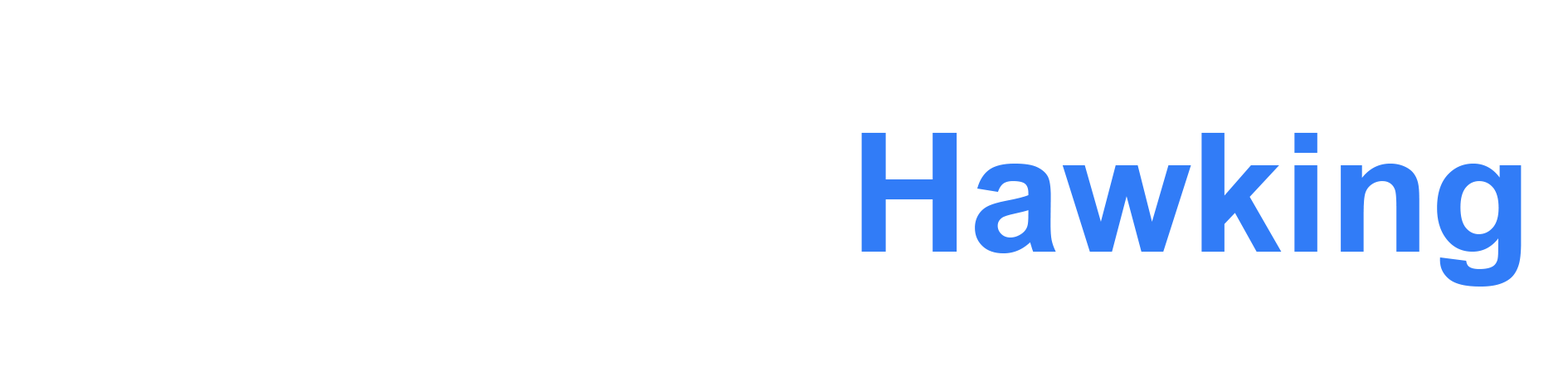
<style>
.page{position:relative;width:1568px;height:392px;background:#ffffff}
.page>*{position:absolute;margin:0}
.t1{font:165.9px "Arial-BoldMT";color:#317cf7}
</style>
<div class="page">
<p class="t1" style="left:861px;top:132px;width:661px;height:154px">Hawking</p>
</div>
